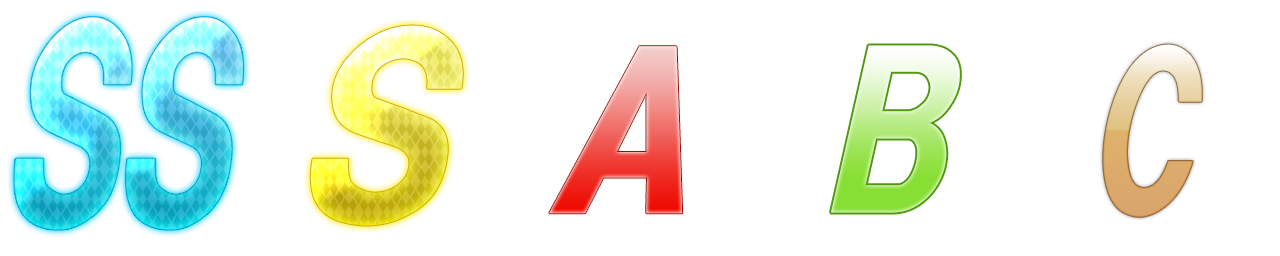
<style>
.page{position:relative;width:1280px;height:256px;background:#ffffff}
.page>*{position:absolute;margin:0}
.t1{font:242.9px "HGSoeiKakugothicUB";letter-spacing:0.05em;font-style:italic;scale:1.39 1}
.t2{font:208.2px "HGSoeiKakugothicUB";letter-spacing:0.05em;font-style:italic;scale:1.42 1}
.t3{font:208.2px "HGSoeiKakugothicUB";letter-spacing:0.05em;font-style:italic;scale:1.28 1}
.t4{font:208.2px "HGSoeiKakugothicUB";letter-spacing:0.05em;font-style:italic}
</style>
<div class="page">
<p class="t1" style="left:310px;top:25px;width:153px;height:201px">S</p>
<p class="t2" style="left:549px;top:46px;width:134px;height:168px">A</p>
<p class="t3" style="left:831px;top:45px;width:129px;height:168px">B</p>
<p class="t4" style="left:1103px;top:44px;width:99px;height:173px">C</p>
</div>
